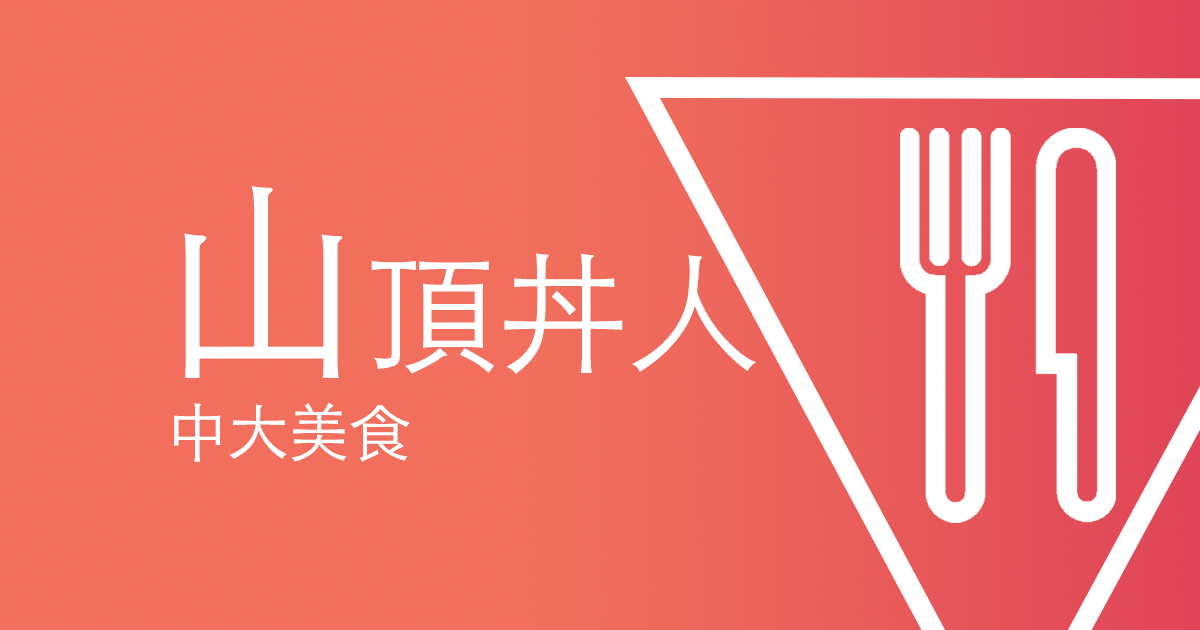
<style>
.page{position:relative;width:1200px;height:630px;background:#f16f5c}
.page>*{position:absolute;margin:0}
.t1{font:133.3px "STHeitiTC-Light";letter-spacing:-0.02em;color:#ffffff}
.t2{font:213.3px "STHeitiTC-Light";letter-spacing:-0.02em;color:#ffffff}
.t3{font:62.2px "STHeitiTC-Light";letter-spacing:-0.02em;color:#ffffff}
</style>
<div class="page">
<p class="t1" style="left:184px;top:186px;width:572px;height:192px"><span class="t2">山</span>頂丼人</p>
<p class="t3" style="left:174px;top:402px;width:236px;height:60px">中大美食</p>
</div>
